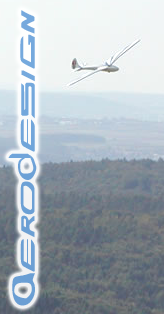
<style>
.page{position:relative;width:164px;height:314px}
.page>*{position:absolute;margin:0}
.t1{font:29px "Seaquest";color:#6ca3db}
</style>
<div class="page">
<p class="t1" style="left:8px;top:10px;width:29px;height:296px;rotate:-90deg;opacity:0.93">AeroDesign</p>
</div>
